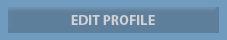
<style>
.page{position:relative;width:227px;height:40px;background:#5d7f9c}
.page>*{position:absolute;margin:0}
.t1{font:14px "MyriadPro-Bold";color:#e0dddd}
</style>
<div class="page">
<p class="t1" style="left:71px;top:15px;width:84px;height:10px;opacity:0.86">EDIT PROFILE</p>
</div>
